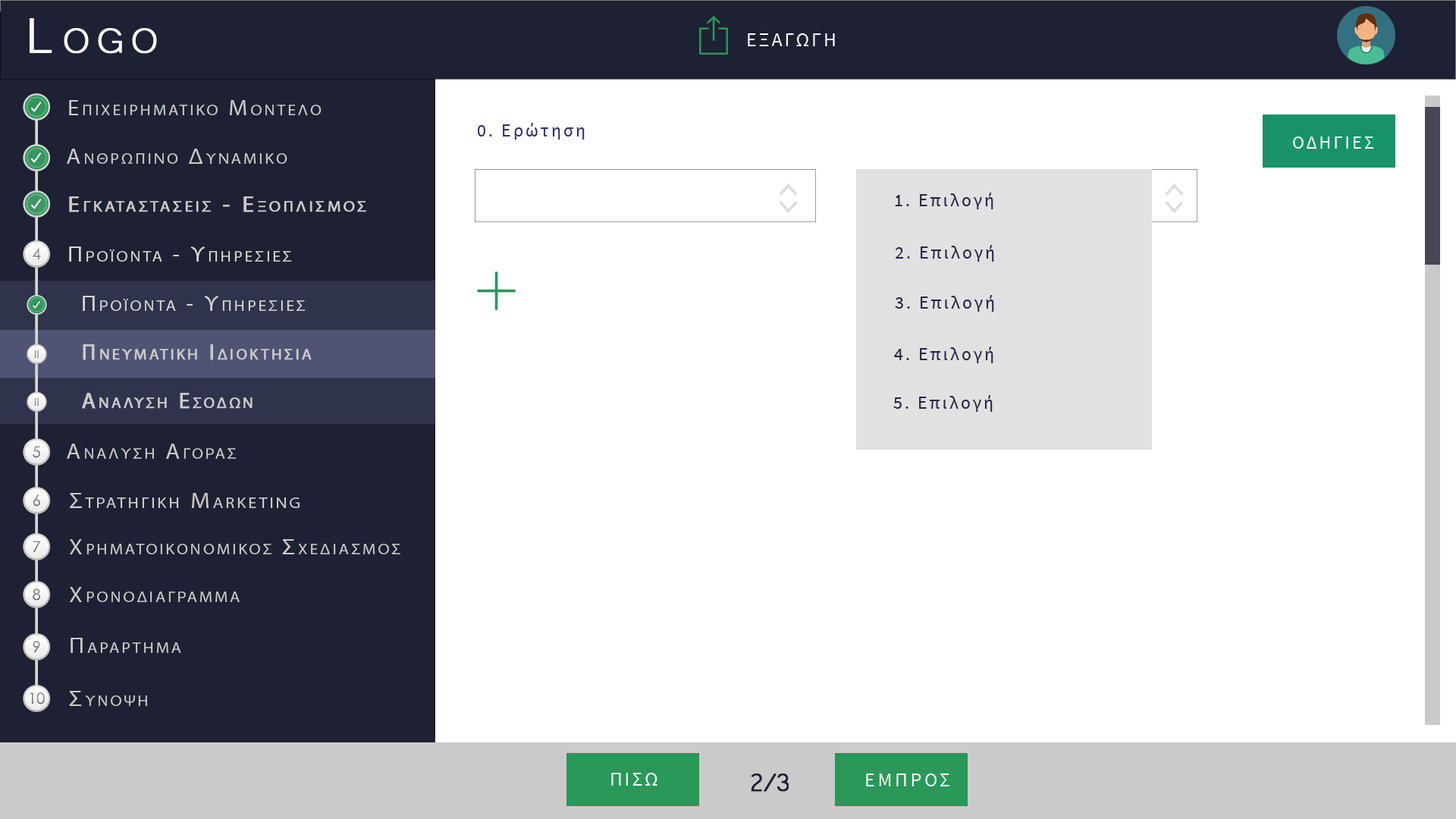
<style>
.page{position:relative;width:1456px;height:819px;background:#ffffff}
.page>*{position:absolute;margin:0}
.t1{font:63.7px "Microsoft-Yi-Baiti";letter-spacing:0.13em;color:#ffffff;font-variant:small-caps;font-weight:bold}
.t2{font:20px "SourceSansPro-Regular";letter-spacing:0.1em;color:#fefefe;text-transform:uppercase}
.t3{font:21.7px "MyriadPro-Regular";letter-spacing:0.13em;color:#cbcaca;font-variant:small-caps;scale:1.09 1}
.t4{font:23.4px "Microsoft-Yi-Baiti";letter-spacing:0.13em;color:#cbcaca;font-variant:small-caps;font-weight:bold}
.t5{font:18.2px "SourceSansPro-Regular";letter-spacing:0.13em;color:#2f2f70}
.t6{font:18.2px "SourceSansPro-Regular";letter-spacing:0.13em;color:#2f2f70;text-transform:uppercase}
.t7{font:18.2px "SourceSansPro-Regular";letter-spacing:0.13em;color:#ffffff;text-transform:uppercase}
.t8{font:21.7px/91px "MyriadPro-Regular";letter-spacing:0.13em;color:#cbcaca;font-variant:small-caps;font-weight:bold;scale:1.09 1}
.t9{font:23.4px/91px "Microsoft-Yi-Baiti";letter-spacing:0.13em;color:#cbcaca;font-variant:small-caps;font-weight:bold}
.t10{font:18.2px "SourceSansPro-Regular";letter-spacing:0.13em;color:#262644}
.t11{font:18.2px "SourceSansPro-Regular";letter-spacing:0.13em;color:#262644;text-transform:uppercase}
.t12{font:15.3px "CenturyGothic";color:#878787}
.t13{font:21.7px "MyriadPro-Regular";letter-spacing:0.13em;color:#d6d6d6;font-variant:small-caps;scale:1.09 1}
.t14{font:23.4px "Microsoft-Yi-Baiti";letter-spacing:0.13em;color:#d6d6d6;font-variant:small-caps;font-weight:bold}
.t15{font:11.2px "CenturyGothic";color:#828282}
.t16{font:22.3px "MyriadPro-Regular";letter-spacing:0.13em;color:#cbcaca;font-variant:small-caps;font-weight:bold}
.t17{font:15.3px "CenturyGothic";color:#898989}
.t18{font:15.3px "CenturyGothic";color:#838383}
.t19{font:22.2px "MyriadPro-Regular";letter-spacing:0.13em;color:#cbcaca;font-variant:small-caps;scale:1.09 1}
.t20{font:25.5px "Microsoft-Yi-Baiti";letter-spacing:0.13em;color:#cbcaca;font-variant:small-caps;font-weight:bold}
.t21{font:15.3px "CenturyGothic";color:#888888}
.t22{font:15.3px "CenturyGothic";color:#8b8b8b}
.t23{font:23.7px "Microsoft-Yi-Baiti";letter-spacing:0.13em;color:#cbcaca;font-variant:small-caps;scale:1.09 1}
.t24{font:32.8px "Microsoft-Yi-Baiti";letter-spacing:-0.1em;color:#1e2133;font-weight:bold}
.t25{font:20px "SourceSansPro-Regular";letter-spacing:0.13em;color:#fefefe;text-transform:uppercase}
</style>
<div class="page">
<p class="t1" style="left:30px;top:18px;width:127px;height:36px">Logo</p>
<p class="t2" style="left:748px;top:33px;width:87px;height:13px">εξαγωγη</p>
<p class="t3" style="left:69px;top:100px;width:253px;height:15px"><span class="t4">   </span>Επιχειρηματικο Μοντελο</p>
<p class="t5" style="left:478px;top:123px;width:107px;height:17px"><span class="t6">0. </span>Ερώτηση</p>
<p class="t7" style="left:1293px;top:136px;width:81px;height:13px">Οδηγιεσ</p>
<p class="t3" style="left:67px;top:149px;width:220px;height:15px"><span class="t4">   </span>Ανθρωπινο Δυναμικο</p>
<p class="t8" style="left:69px;top:196px;width:297px;height:16px"><span class="t9">   </span>Εγκαταστασεισ - Εξοπλισμοσ<br><br><span class="t9">Equipment</span></p>
<p class="t10" style="left:895px;top:193px;width:98px;height:16px"><span class="t11">1. </span>Επιλογή</p>
<p class="t10" style="left:895px;top:245px;width:99px;height:17px"><span class="t11">2. </span>Επιλογή</p>
<p class="t12" style="left:33px;top:248px;width:8px;height:12px">4</p>
<p class="t13" style="left:69px;top:246px;width:223px;height:16px"><span class="t14">   </span>Προϊοντα - Υπηρεσιεσ</p>
<p class="t13" style="left:83px;top:296px;width:223px;height:15px"><span class="t14">   </span>Προϊοντα - Υπηρεσιεσ</p>
<p class="t10" style="left:895px;top:295px;width:99px;height:17px"><span class="t11">3. </span>Επιλογή</p>
<p class="t15" style="left:35px;top:350px;width:4px;height:9px">II</p>
<p class="t16" style="left:83px;top:344px;width:229px;height:16px">Πνευματικη Ιδιοκτησια</p>
<p class="t10" style="left:894px;top:347px;width:99px;height:16px"><span class="t11">4. </span>Επιλογή</p>
<p class="t15" style="left:35px;top:397px;width:4px;height:9px">II</p>
<p class="t16" style="left:82px;top:393px;width:171px;height:16px">Αναλυση Εσοδων</p>
<p class="t10" style="left:893px;top:395px;width:100px;height:17px"><span class="t11">5. </span>Επιλογή</p>
<p class="t17" style="left:33px;top:446px;width:7px;height:12px">5</p>
<p class="t3" style="left:67px;top:444px;width:170px;height:15px"><span class="t4">   </span>Αναλυση Αγορασ</p>
<p class="t18" style="left:33px;top:494px;width:7px;height:13px">6</p>
<p class="t19" style="left:70px;top:493px;width:230px;height:15px"><span class="t20">   </span>Στρατηγικη Marketing</p>
<p class="t21" style="left:33px;top:541px;width:8px;height:12px">7</p>
<p class="t3" style="left:69px;top:539px;width:331px;height:15px"><span class="t20">   </span>Χρηματοικονομικοσ Σχεδιασμοσ</p>
<p class="t22" style="left:33px;top:588px;width:8px;height:13px">8</p>
<p class="t3" style="left:69px;top:587px;width:171px;height:15px"><span class="t20">   </span>Χρονοδιαγραμμα</p>
<p class="t18" style="left:33px;top:641px;width:7px;height:12px">9</p>
<p class="t3" style="left:71px;top:638px;width:110px;height:15px"><span class="t23">   </span>Παραρτημα</p>
<p class="t12" style="left:30px;top:692px;width:15px;height:12px">10</p>
<p class="t3" style="left:69px;top:691px;width:78px;height:15px"><span class="t23">   </span>Συνοψη</p>
<p class="t2" style="left:611px;top:773px;width:46px;height:13px">Πισω</p>
<p class="t24" style="left:751px;top:773px;width:38px;height:19px">2/3</p>
<p class="t25" style="left:866px;top:773px;width:83px;height:13px">εμπροσ</p>
</div>
